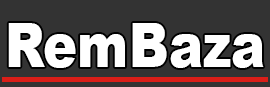
<style>
.page{position:relative;width:270px;height:87px;background:#333333}
.page>*{position:absolute;margin:0}
.t1{font:60.8px "Arial-Black";color:#ffffff;scale:0.84 1}
</style>
<div class="page">
<p class="t1" style="left:8px;top:23px;width:256px;height:45px">RemBaza</p>
</div>
